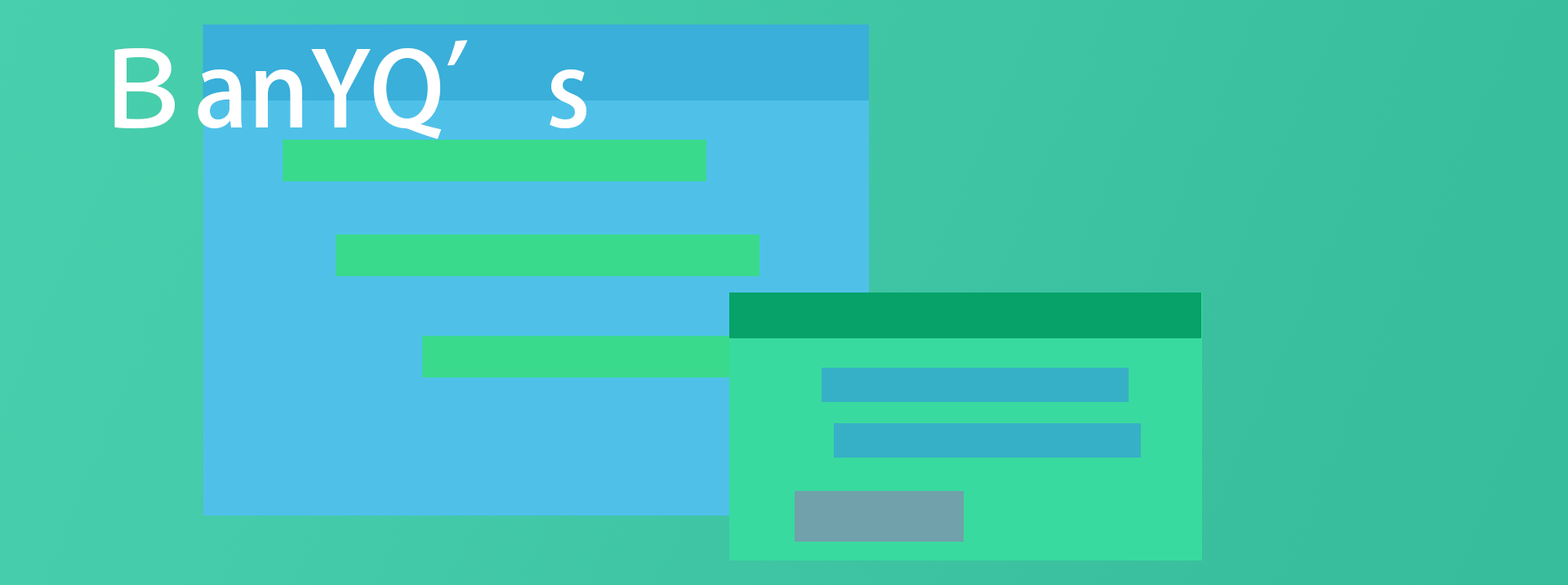
<style>
.page{position:relative;width:1568px;height:585px}
.page>*{position:absolute;margin:0}
.t1{font:102.1px "AdobeHeitiStd-Regular";color:#ffffff}
</style>
<div class="page">
<p class="t1" style="left:114px;top:40px;width:472px;height:100px">BanYQ’s</p>
</div>
